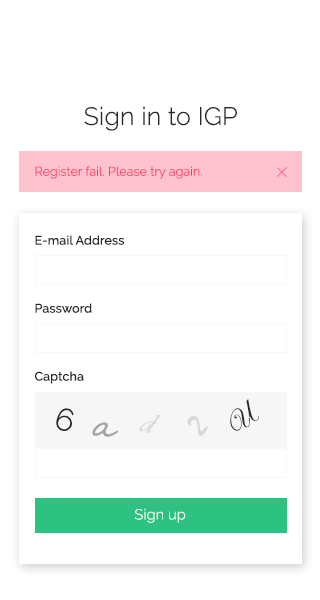
<style>
.page{position:relative;width:320px;height:600px;background:#ffffff}
.page>*{position:absolute;margin:0}
.t1{font:25px "Raleway-Light";letter-spacing:0.01em;color:#282828}
.t2{font:12.5px "Raleway-Light";letter-spacing:0.01em;color:#ff3860}
.t3{font:12.5px "Raleway-Medium";letter-spacing:0.01em;color:#282828}
.t4{font:31.2px "EdwardianScriptITC";letter-spacing:0.01em;color:#282828}
.t5{font:31.3px "Raleway-Light";letter-spacing:0.01em;color:#282828}
.t6{font:31.3px "Vivaldii";letter-spacing:0.01em;color:#d8d8d8}
.t7{font:31.3px "SegoeScript";letter-spacing:0.01em;color:#a4a4a4}
.t8{font:31.2px "Mistral";letter-spacing:0.01em;color:#d8d8d8}
.t9{font:14.6px "Raleway-Light";letter-spacing:0.01em;color:#ffffff}
</style>
<div class="page">
<p class="t1" style="left:84px;top:106px;width:153px;height:25px">Sign in to IGP</p>
<p class="t2" style="left:35px;top:166px;width:167px;height:13px">Register fail. Please try again.</p>
<p class="t3" style="left:35px;top:235px;width:90px;height:10px">E-mail Address</p>
<p class="t3" style="left:35px;top:303px;width:57px;height:10px">Password</p>
<p class="t3" style="left:35px;top:371px;width:49px;height:13px">Captcha</p>
<p class="t4" style="left:230px;top:399px;width:29px;height:32px;rotate:-45deg">U</p>
<p class="t5" style="left:56px;top:408px;width:18px;height:23px;rotate:15deg">6</p>
<p class="t6" style="left:139px;top:414px;width:22px;height:19px;rotate:15deg">d</p>
<p class="t7" style="left:92px;top:422px;width:26px;height:15px;rotate:15deg">a</p>
<p class="t8" style="left:187px;top:415px;width:21px;height:21px;rotate:-45deg">2</p>
<p class="t9" style="left:134px;top:508px;width:52px;height:15px">Sign up</p>
</div>
